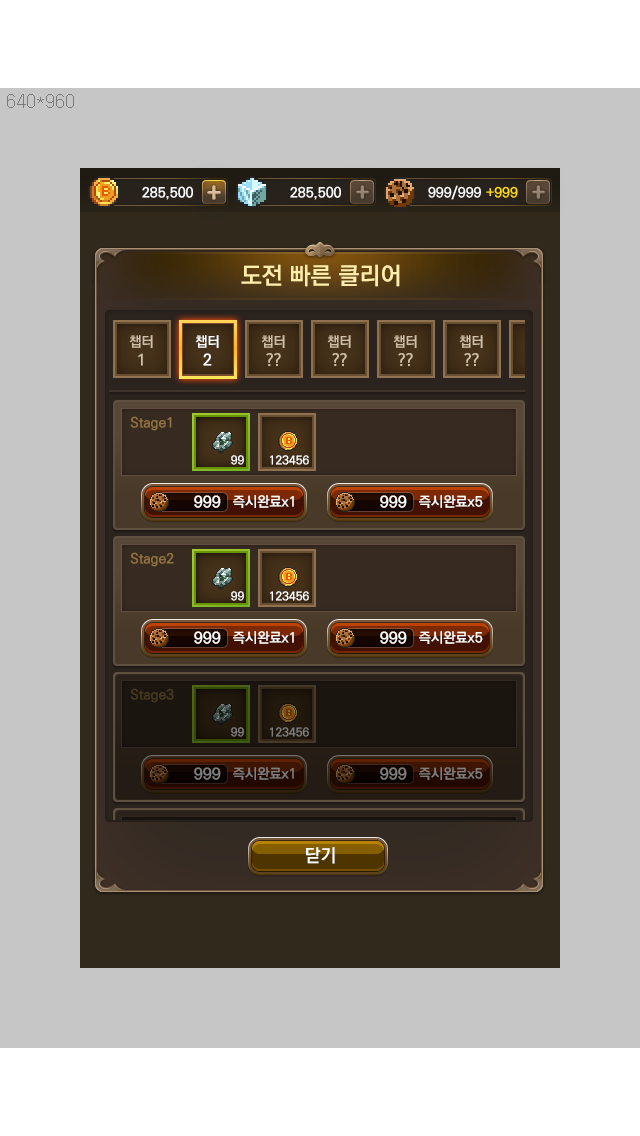
<style>
.page{position:relative;width:640px;height:1136px;background:#c6c6c6}
.page>*{position:absolute;margin:0}
.t1{font:24px "KoPubDotumBold";color:#ffedab}
.t2{font:14px "KoPubDotumBold";color:#d0c0a6}
.t3{font:16px "KoPubDotumBold";color:#d0c0a6}
.t4{font:14px "KoPubDotumBold";color:#ffffff}
.t5{font:16px "KoPubDotumBold";color:#ffffff}
.t6{font:14px "KoPubDotumBold";color:#937340}
.t7{font:12px "KoPubDotumBold";color:#ffffff}
.t8{font:14px "KoPubDotumBold";color:#493920}
.t9{font:12px "KoPubDotumBold";color:#7f7f7f}
.t10{font:16px "KoPubDotumBold";color:#7f7f7f}
.t11{font:14px "KoPubDotumBold";color:#7f7f7f}
.t12{font:18px "KoPubDotumBold";color:#ffffff}
</style>
<div class="page">
<p class="t1" style="left:241px;top:264px;width:159px;height:23px">도전 빠른 클리어</p>
<p class="t2" style="left:129px;top:335px;width:24px;height:31px;text-align:center">챕터<br><span class="t3">1</span></p>
<p class="t4" style="left:195px;top:335px;width:24px;height:31px;text-align:center">챕터<br><span class="t5">2</span></p>
<p class="t6" style="left:130px;top:416px;width:42px;height:15px">Stage1</p>
<p class="t7" style="left:231px;top:455px;width:13px;height:10px">99</p>
<p class="t7" style="left:270px;top:455px;width:39px;height:10px">123456</p>
<p class="t5" style="left:194px;top:495px;width:27px;height:13px">999</p>
<p class="t4" style="left:233px;top:495px;width:61px;height:13px">즉시완료x1</p>
<p class="t5" style="left:380px;top:495px;width:27px;height:13px">999</p>
<p class="t4" style="left:419px;top:495px;width:64px;height:13px">즉시완료x5</p>
<p class="t6" style="left:130px;top:552px;width:44px;height:15px">Stage2</p>
<p class="t7" style="left:231px;top:591px;width:13px;height:10px">99</p>
<p class="t7" style="left:270px;top:591px;width:39px;height:10px">123456</p>
<p class="t5" style="left:194px;top:631px;width:27px;height:13px">999</p>
<p class="t4" style="left:233px;top:631px;width:61px;height:13px">즉시완료x1</p>
<p class="t5" style="left:380px;top:631px;width:27px;height:13px">999</p>
<p class="t4" style="left:419px;top:631px;width:64px;height:13px">즉시완료x5</p>
<p class="t8" style="left:130px;top:688px;width:44px;height:15px">Stage3</p>
<p class="t9" style="left:231px;top:727px;width:13px;height:10px">99</p>
<p class="t9" style="left:270px;top:727px;width:39px;height:10px">123456</p>
<p class="t10" style="left:194px;top:767px;width:27px;height:13px">999</p>
<p class="t11" style="left:233px;top:767px;width:61px;height:13px">즉시완료x1</p>
<p class="t10" style="left:380px;top:767px;width:27px;height:13px">999</p>
<p class="t11" style="left:419px;top:767px;width:64px;height:13px">즉시완료x5</p>
<p class="t12" style="left:306px;top:847px;width:29px;height:17px">닫기</p>
</div>
